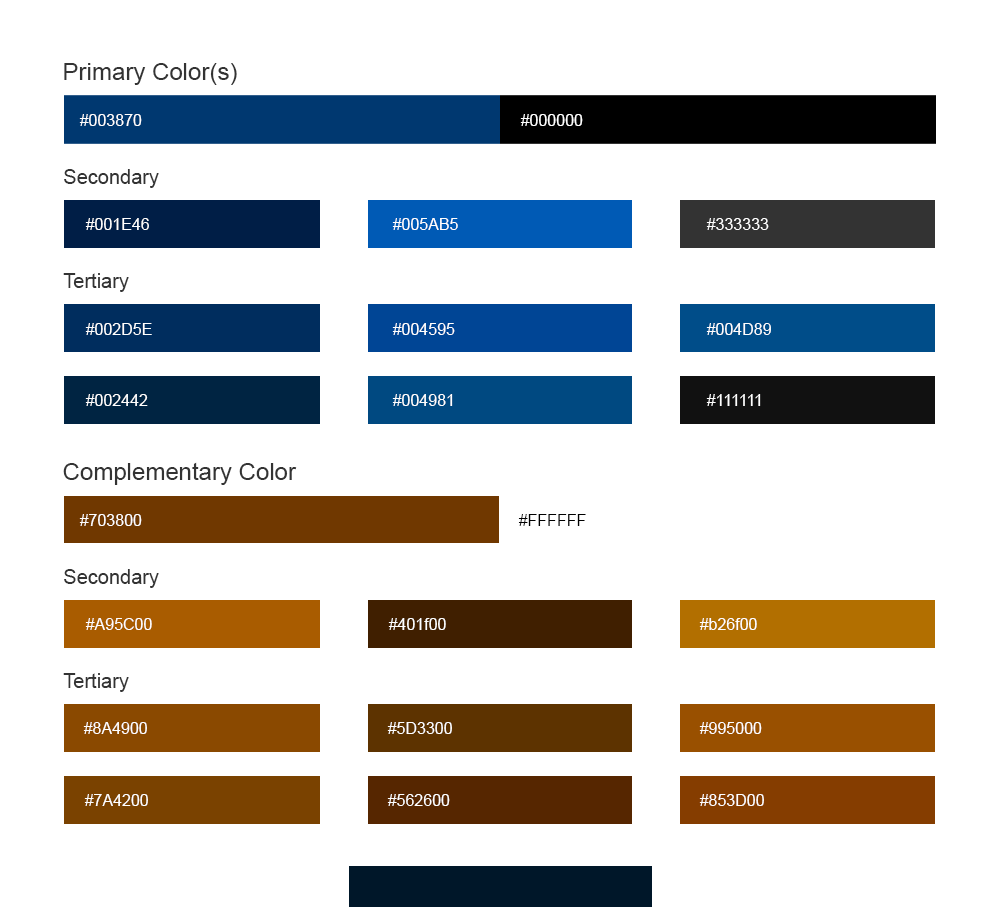
<style>
.page{position:relative;width:1000px;height:924px;background:#ffffff}
.page>*{position:absolute;margin:0}
.t1{font:24px "ArialMT";color:#333333}
.t2{font:16px "ArialMT";color:#ffffff}
.t3{font:20px "ArialMT";color:#333333}
.t4{font:16px "ArialMT";color:#000000}
</style>
<div class="page">
<p class="t1" style="left:64px;top:63px;width:173px;height:22px">Primary Color(s)</p>
<p class="t2" style="left:79px;top:114px;width:63px;height:12px">#003870</p>
<p class="t2" style="left:520px;top:114px;width:63px;height:12px">#000000</p>
<p class="t3" style="left:64px;top:169px;width:95px;height:19px">Secondary</p>
<p class="t2" style="left:85px;top:218px;width:64px;height:12px">#001E46</p>
<p class="t2" style="left:392px;top:218px;width:66px;height:12px">#005AB5</p>
<p class="t2" style="left:706px;top:218px;width:63px;height:12px">#333333</p>
<p class="t3" style="left:63px;top:273px;width:66px;height:19px">Tertiary</p>
<p class="t2" style="left:85px;top:323px;width:67px;height:12px">#002D5E</p>
<p class="t2" style="left:392px;top:323px;width:63px;height:12px">#004595</p>
<p class="t2" style="left:706px;top:323px;width:65px;height:12px">#004D89</p>
<p class="t2" style="left:85px;top:394px;width:63px;height:12px">#002442</p>
<p class="t2" style="left:392px;top:394px;width:61px;height:12px">#004981</p>
<p class="t2" style="left:706px;top:394px;width:55px;height:12px">#111111</p>
<p class="t1" style="left:63px;top:462px;width:234px;height:23px">Complementary Color</p>
<p class="t2" style="left:79px;top:514px;width:63px;height:12px">#703800</p>
<p class="t4" style="left:518px;top:514px;width:68px;height:12px">#FFFFFF</p>
<p class="t3" style="left:64px;top:569px;width:95px;height:19px">Secondary</p>
<p class="t2" style="left:85px;top:618px;width:67px;height:12px">#A95C00</p>
<p class="t2" style="left:388px;top:618px;width:58px;height:12px">#401f00</p>
<p class="t2" style="left:699px;top:618px;width:58px;height:12px">#b26f00</p>
<p class="t3" style="left:63px;top:673px;width:66px;height:19px">Tertiary</p>
<p class="t2" style="left:83px;top:722px;width:64px;height:12px">#8A4900</p>
<p class="t2" style="left:387px;top:722px;width:65px;height:12px">#5D3300</p>
<p class="t2" style="left:699px;top:722px;width:63px;height:12px">#995000</p>
<p class="t2" style="left:84px;top:794px;width:64px;height:12px">#7A4200</p>
<p class="t2" style="left:387px;top:794px;width:63px;height:12px">#562600</p>
<p class="t2" style="left:699px;top:794px;width:65px;height:12px">#853D00</p>
</div>
